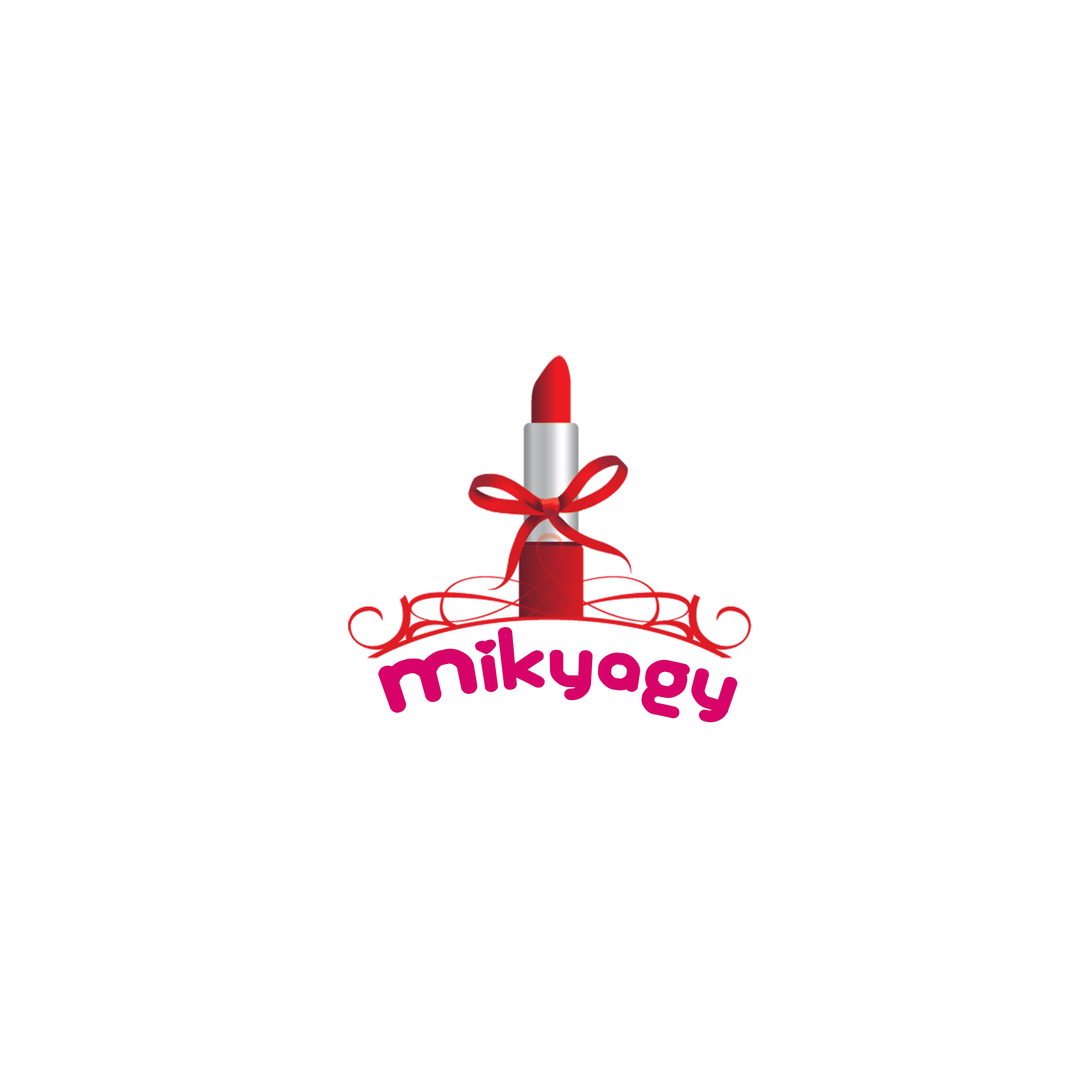
<style>
.page{position:relative;width:1092px;height:1092px;background:#ffffff}
.page>*{position:absolute;margin:0}
.t1{font:89px "Glamourgirl";color:#d80368}
.t2{font:114.4px "Glamourgirl";color:#d80368}
</style>
<div class="page">
<p class="t1" style="left:378px;top:627px;width:359px;height:95px"><span class="t2">m</span>ikyagy</p>
</div>
